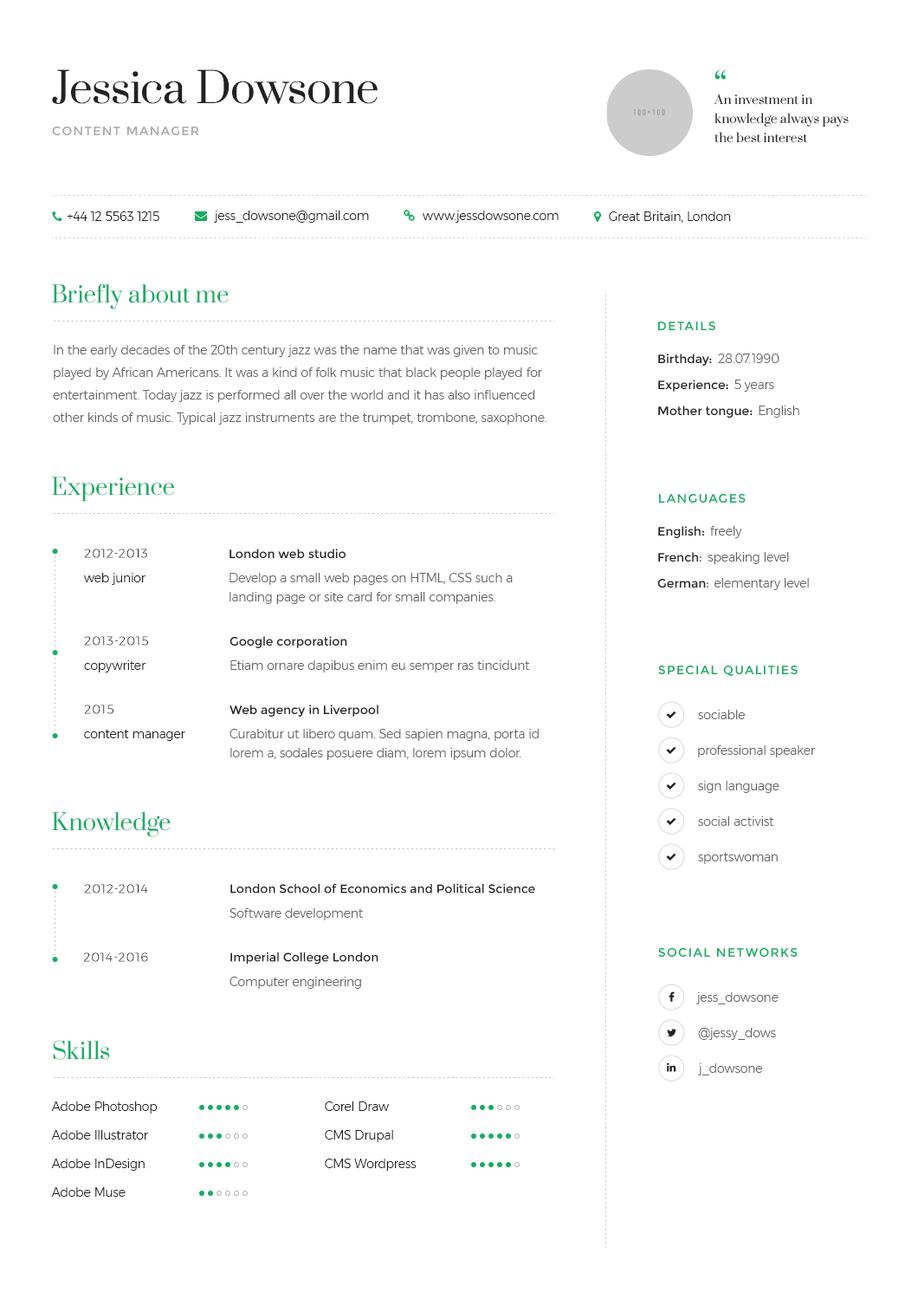
<style>
.page{position:relative;width:918px;height:1299px;background:#ffffff}
.page>*{position:absolute;margin:0}
.t1{font:41.6px "Prata-Regular";color:#222222}
.t2{font:34.7px "Prata-Regular";color:#17ac64}
.t3{font:12.1px/19.1px "Prata-Regular";color:#222222}
.t4{font:12.1px "Montserrat-Regular";letter-spacing:0.1em;color:#a9a9a9;text-transform:uppercase}
.t5{font:22.5px "Prata-Regular";color:#17ac64}
.t6{font:12.1px "Montserrat-Regular";letter-spacing:0.1em;color:#17ac64;text-transform:uppercase}
.t7{font:12.1px/22.5px "Montserrat-Light";color:#656565}
.t8{font:12.1px/26px "Montserrat-Regular";color:#222222}
.t9{font:12.1px "Montserrat-Light";color:#656565}
.t10{font:12.1px/26px "MinionPro-Regular";color:#222222}
.t11{font:12.1px "Montserrat-Light";letter-spacing:0.1em;color:#222222;text-transform:uppercase}
.t12{font:12.1px "Montserrat-Regular";color:#222222}
.t13{font:12.1px "Montserrat-Light";color:#222222}
.t14{font:12.1px/19.1px "Montserrat-Light";color:#656565}
</style>
<div class="page">
<p class="t1" style="left:52px;top:69px;width:326px;height:35px">Jessica Dowsone</p>
<p class="t2" style="left:715px;top:69px;width:11px;height:11px">“</p>
<p class="t3" style="left:714px;top:94px;width:135px;height:49px">An investment in knowledge always pays the best interest</p>
<p class="t4" style="left:52px;top:126px;width:147px;height:10px">content manager</p>
<p class="t5" style="left:52px;top:284px;width:177px;height:25px">Briefly about me</p>
<p class="t6" style="left:658px;top:321px;width:58px;height:10px">Details</p>
<p class="t7" style="left:53px;top:345px;width:494px;height:79px">In the early decades of the 20th century jazz was the name that was given to music played by African Americans. It was a kind of folk music that black people played for entertainment. Today jazz is performed all over the world and it has also influenced other kinds of music. Typical jazz instruments are the trumpet, trombone, saxophone.<br><br>The features of jazz are its sound and rhythms. Jazz is improvised music that shows strong emotions and feelings.</p>
<p class="t8" style="left:658px;top:353px;width:95px;height:65px">Birthday:<br>Experience:<br>Mother tongue:</p>
<p class="t9" style="left:718px;top:353px;width:62px;height:10px">28.07.1990</p>
<p class="t9" style="left:735px;top:379px;width:39px;height:13px">5 years</p>
<p class="t9" style="left:759px;top:405px;width:41px;height:13px">English</p>
<p class="t5" style="left:52px;top:476px;width:122px;height:26px">Experience</p>
<p class="t6" style="left:658px;top:493px;width:88px;height:10px">Languages</p>
<p class="t8" style="left:658px;top:526px;width:51px;height:62px">English:<br>French<span class="t10">:<br></span>German<span class="t10">:</span></p>
<p class="t9" style="left:710px;top:526px;width:32px;height:12px">freely</p>
<p class="t11" style="left:84px;top:548px;width:63px;height:10px">2012-2013</p>
<p class="t12" style="left:230px;top:548px;width:117px;height:11px">London web studio</p>
<p class="t9" style="left:708px;top:552px;width:81px;height:12px">speaking level</p>
<p class="t13" style="left:83px;top:573px;width:63px;height:12px">web junior</p>
<p class="t14" style="left:230px;top:573px;width:283px;height:31px">Develop a small web pages on HTML, CSS such a landing page or site card for small companies.</p>
<p class="t9" style="left:715px;top:578px;width:94px;height:12px">elementary level</p>
<p class="t11" style="left:84px;top:636px;width:64px;height:9px">2013-2015</p>
<p class="t12" style="left:230px;top:636px;width:117px;height:13px">Google corporation</p>
<p class="t13" style="left:84px;top:660px;width:62px;height:12px">copywriter</p>
<p class="t9" style="left:230px;top:660px;width:300px;height:12px">Etiam ornare dapibus enim eu semper ras tincidunt mollis mauris quis luctus.</p>
<p class="t6" style="left:658px;top:664px;width:140px;height:12px">Special qualities</p>
<p class="t11" style="left:84px;top:704px;width:29px;height:10px">2015</p>
<p class="t12" style="left:230px;top:704px;width:149px;height:13px">Web agency in Liverpool</p>
<p class="t9" style="left:698px;top:709px;width:47px;height:10px">sociable</p>
<p class="t13" style="left:84px;top:729px;width:101px;height:12px">content manager</p>
<p class="t14" style="left:230px;top:729px;width:309px;height:31px">Curabitur ut libero quam. Sed sapien magna, porta id lorem a, sodales posuere diam, lorem ipsum dolor.</p>
<p class="t9" style="left:698px;top:745px;width:117px;height:12px">professional speaker</p>
<p class="t9" style="left:698px;top:781px;width:82px;height:12px">sign language</p>
<p class="t5" style="left:52px;top:812px;width:119px;height:25px">Knowledge</p>
<p class="t9" style="left:698px;top:816px;width:76px;height:10px">social activist</p>
<p class="t9" style="left:698px;top:852px;width:80px;height:12px">sportswoman</p>
<p class="t11" style="left:84px;top:884px;width:64px;height:9px">2012-2014</p>
<p class="t12" style="left:230px;top:883px;width:305px;height:10px">London School of Economics and Political Science</p>
<p class="t9" style="left:230px;top:908px;width:133px;height:12px">Software development</p>
<p class="t11" style="left:83px;top:952px;width:65px;height:10px">2014-2016</p>
<p class="t12" style="left:230px;top:951px;width:149px;height:13px">Imperial College London</p>
<p class="t6" style="left:658px;top:947px;width:140px;height:10px">Social networks</p>
<p class="t9" style="left:230px;top:976px;width:131px;height:12px">Computer engineering</p>
<p class="t9" style="left:696px;top:992px;width:83px;height:12px">jess_dowsone</p>
<p class="t9" style="left:698px;top:1027px;width:78px;height:13px">@jessy_dows</p>
<p class="t5" style="left:53px;top:1040px;width:57px;height:19px">Skills</p>
<p class="t9" style="left:698px;top:1063px;width:64px;height:12px">j_dowsone</p>
<p class="t13" style="left:51px;top:1101px;width:107px;height:12px">Adobe Photoshop</p>
<p class="t13" style="left:325px;top:1101px;width:65px;height:10px">Corel Draw</p>
<p class="t13" style="left:51px;top:1130px;width:97px;height:9px">Adobe Illustrator</p>
<p class="t13" style="left:325px;top:1130px;width:68px;height:12px">CMS Drupal</p>
<p class="t13" style="left:51px;top:1158px;width:94px;height:12px">Adobe InDesign</p>
<p class="t13" style="left:325px;top:1158px;width:92px;height:12px">CMS Wordpress</p>
<p class="t13" style="left:51px;top:1187px;width:75px;height:9px">Adobe Muse</p>
</div>
